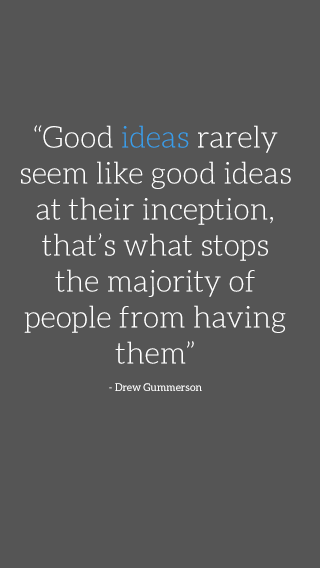
<style>
.page{position:relative;width:320px;height:568px;background:#555555}
.page>*{position:absolute;margin:0}
.t1{font:30px "Aleo-Light";color:#ffffff}
.t2{font:30px "Aleo-Light";color:#379eea}
.t3{font:18px "Aleo-Regular";color:#ffffff}
</style>
<div class="page">
<p class="t1" style="left:21px;top:125px;width:270px;height:266px;text-align:center">“Good <span class="t2">ideas</span> rarely seem like good ideas at their inception, that’s what stops the majority of people from having them” <br><span class="t3">- Drew Gummerson</span></p>
</div>
